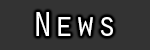
<style>
.page{position:relative;width:150px;height:50px;background:#333333}
.page>*{position:absolute;margin:0}
.t1{font:36px "OratorStd";color:#ffffff}
</style>
<div class="page">
<p class="t1" style="left:36px;top:12px;width:77px;height:24px">News</p>
</div>
